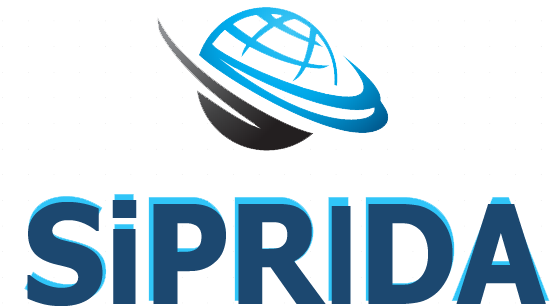
<style>
.page{position:relative;width:555px;height:306px;background:#ffffff}
.page>*{position:absolute;margin:0}
.t1{font:137.1px "Tahoma-Bold";color:#1c4870;scale:0.94 1}
.t2{font:137.1px "Arial-BoldMT";color:#1c4870;scale:0.94 1}
</style>
<div class="page">
<p class="t1" style="left:27px;top:200px;width:519px;height:106px">SiPR<span class="t2">I</span>DA</p>
</div>
